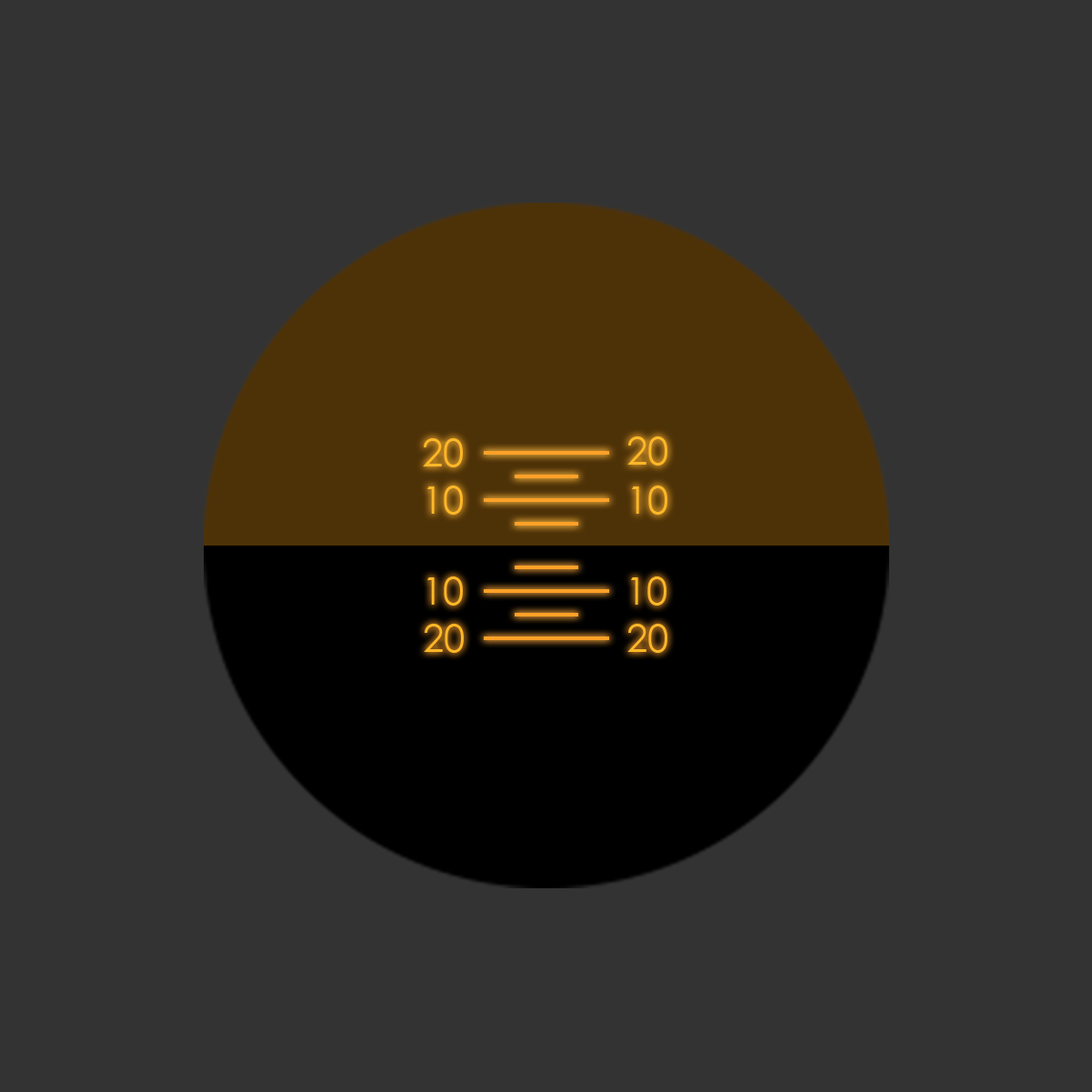
<style>
.page{position:relative;width:1092px;height:1092px;background:#333333}
.page>*{position:absolute;margin:0}
.t1{font:37.9px "CenturyGothic";color:#ffb728}
</style>
<div class="page">
<p class="t1" style="left:627px;top:436px;width:40px;height:30px">20</p>
<p class="t1" style="left:423px;top:438px;width:40px;height:29px">20</p>
<p class="t1" style="left:427px;top:486px;width:36px;height:29px">10</p>
<p class="t1" style="left:632px;top:486px;width:35px;height:29px">10</p>
<p class="t1" style="left:427px;top:576px;width:36px;height:30px">10</p>
<p class="t1" style="left:631px;top:576px;width:35px;height:30px">10</p>
<p class="t1" style="left:424px;top:624px;width:40px;height:29px">20</p>
<p class="t1" style="left:627px;top:624px;width:40px;height:29px">20</p>
</div>
